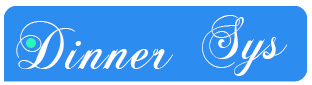
<style>
.page{position:relative;width:312px;height:85px;background:#2d8cf0}
.page>*{position:absolute;margin:0}
.t1{font:60px "ChopinScript";letter-spacing:0.026em;color:#ffffff}
</style>
<div class="page">
<p class="t1" style="left:202px;top:15px;width:86px;height:61px">Sys</p>
<p class="t1" style="left:16px;top:21px;width:157px;height:48px">Dinner</p>
</div>
